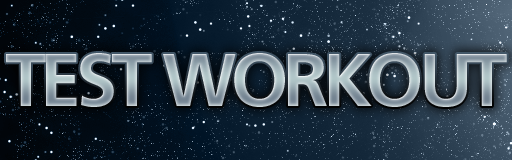
<style>
.page{position:relative;width:512px;height:160px}
.page>*{position:absolute;margin:0}
.t1{font:74px "FrutigerLTStd-Bold";letter-spacing:-0.075em}
</style>
<div class="page">
<p class="t1" style="left:6px;top:53px;width:501px;height:54px">TEST WORKOUT</p>
</div>
